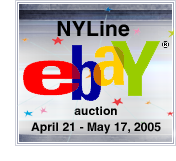
<style>
.page{position:relative;width:176px;height:161px;background:#ffffff}
.page>*{position:absolute;margin:0}
.t1{font:21px "Helvetica-Bold";letter-spacing:0.01em;color:#000000}
.t2{font:12px "Helvetica-Bold";letter-spacing:0.01em;color:#000000}
</style>
<div class="page">
<p class="t1" style="left:57px;top:21px;width:73px;height:16px">NYLine</p>
<p class="t2" style="left:74px;top:106px;width:43px;height:9px">auction</p>
<p class="t2" style="left:31px;top:122px;width:130px;height:12px">April 21 - May 17, 2005</p>
</div>
